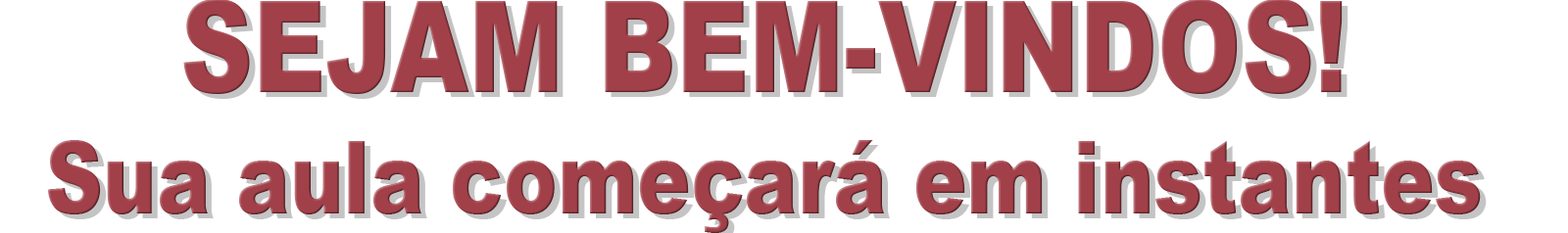
<style>
.page{position:relative;width:1568px;height:233px;background:#ffffff}
.page>*{position:absolute;margin:0}
.t1{font:101.2px "Arial-Black";color:#a24049;scale:0.79 1}
.t2{font:127.4px "Arial-Black";color:#a24049;scale:0.79 1}
</style>
<div class="page">
<p class="t1" style="left:47px;top:0px;width:1434px;height:233px;text-align:center"><span class="t2">SEJAM BEM-VINDOS!<br></span>Sua aula começará em instantes</p>
</div>
